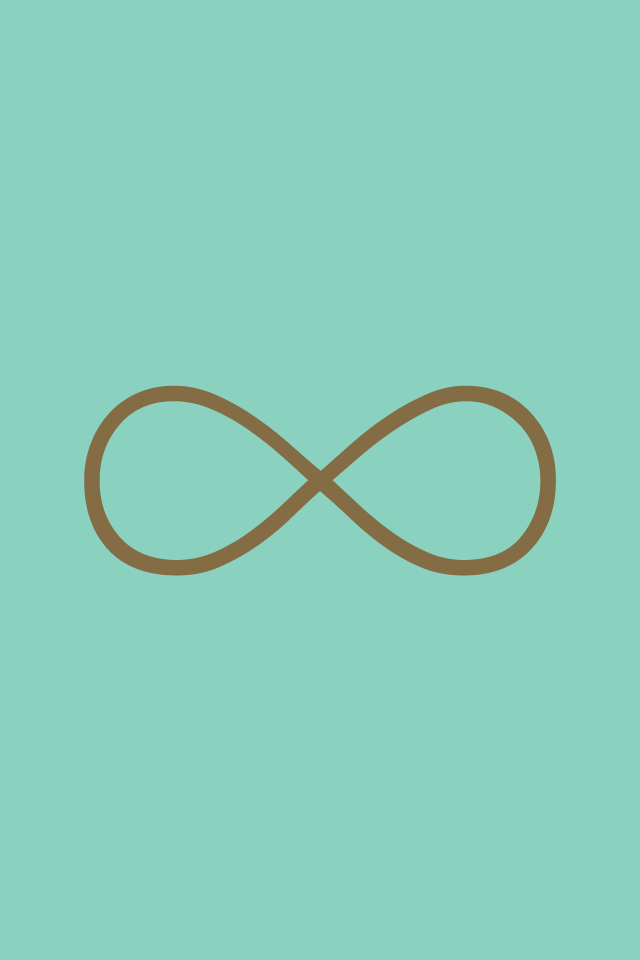
<style>
.page{position:relative;width:640px;height:960px;background:#8ad1c0}
.page>*{position:absolute;margin:0}
.t1{font:768px "HelveticaNeue-UltraLight";color:#846c45}
</style>
<div class="page">
<p class="t1" style="left:84px;top:385px;width:472px;height:191px">∞</p>
</div>
